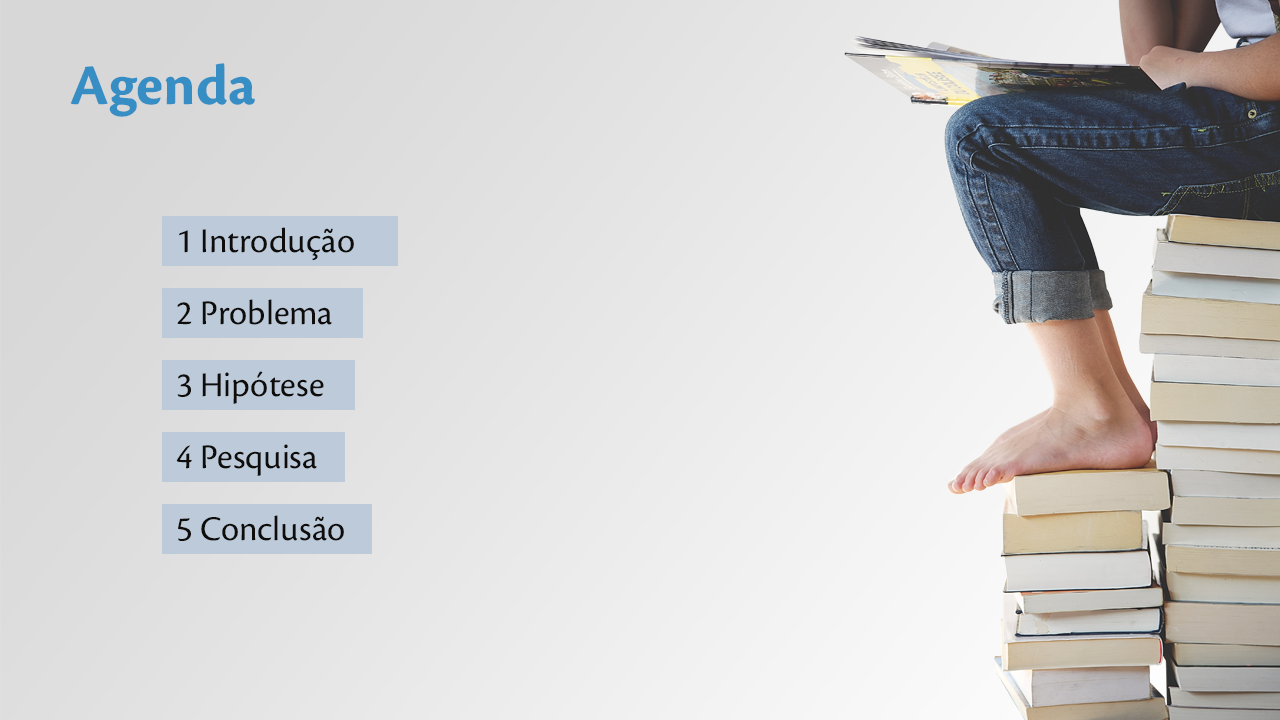
<style>
.page{position:relative;width:1280px;height:720px}
.page>*{position:absolute;margin:0}
.t1{font:60px "CronosPro-Bold";color:#368ec5}
.t2{font:36px/72px "CronosPro-Regular";color:#0e0d0c}
</style>
<div class="page">
<p class="t1" style="left:70px;top:63px;width:185px;height:54px">Agenda</p>
<p class="t2" style="left:176px;top:227px;width:178px;height:314px">1 Introdução<br>2 Problema<br>3 Hipótese<br>4 Pesquisa<br>5 Conclusão</p>
</div>
